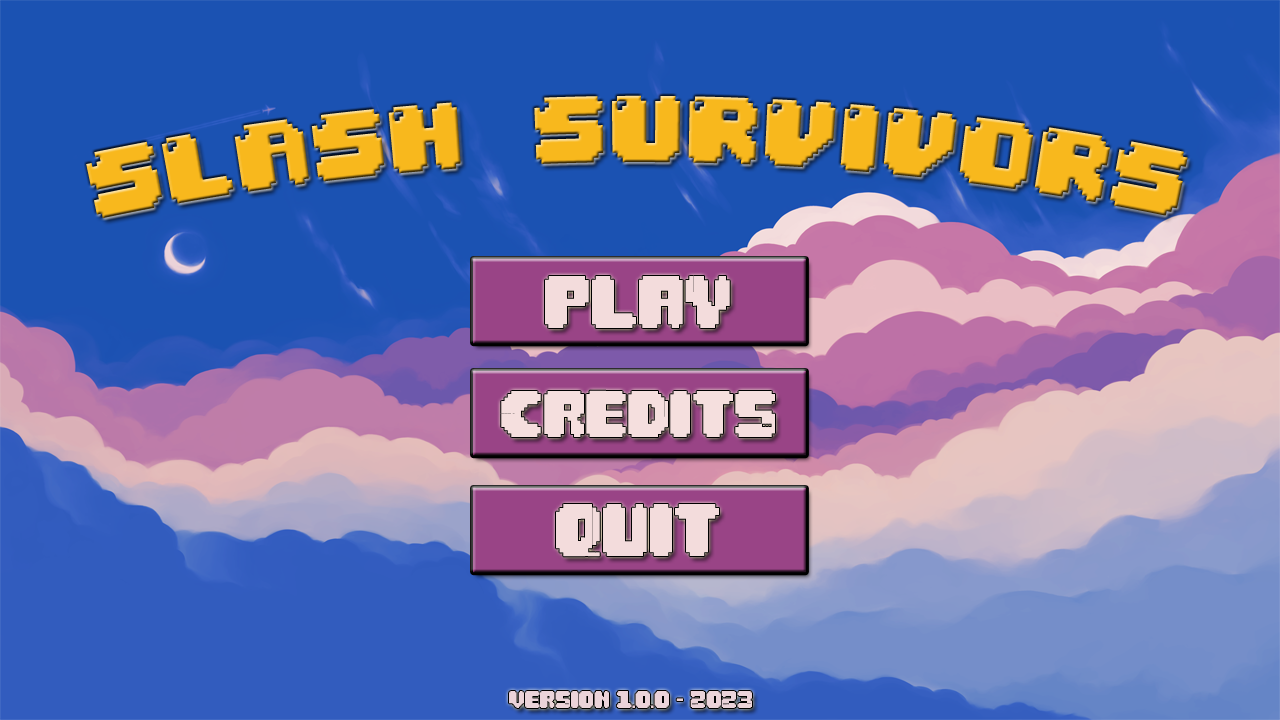
<style>
.page{position:relative;width:1280px;height:720px;background:#1b52b2}
.page>*{position:absolute;margin:0}
.t1{font:80px "04b30";color:#f8b81d}
.t2{font:73.7px "ShapeBit-Regular";color:#f3dcdc}
.t3{font:66px "ShapeBit-Regular";color:#f5dfde}
.t4{font:24px "ShapeBit-Regular";color:#ebd3d9}
</style>
<div class="page">
<p class="t1" style="left:86px;top:95px;width:1102px;height:123px">SLASH SURVIVORS</p>
<p class="t2" style="left:545px;top:276px;width:185px;height:52px">PLAY</p>
<p class="t3" style="left:501px;top:390px;width:274px;height:47px">Credits</p>
<p class="t2" style="left:556px;top:504px;width:163px;height:53px">quit</p>
<p class="t4" style="left:509px;top:691px;width:243px;height:17px">version 1.0.0 - 2023</p>
</div>
